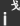
<style>
.page{position:relative;width:20px;height:26px;background:#333333}
.page>*{position:absolute;margin:0}
.t1{font:12px "DFKaiShu-SB-Estd-BF";color:#ececec;font-weight:bold}
.t2{font:18px "ArialMT";color:#ececec;font-weight:bold}
</style>
<div class="page">
<p class="t1" style="left:11px;top:0px;width:9px;height:11px">戈</p>
<p class="t2" style="left:3px;top:12px;width:4px;height:14px">i</p>
</div>
